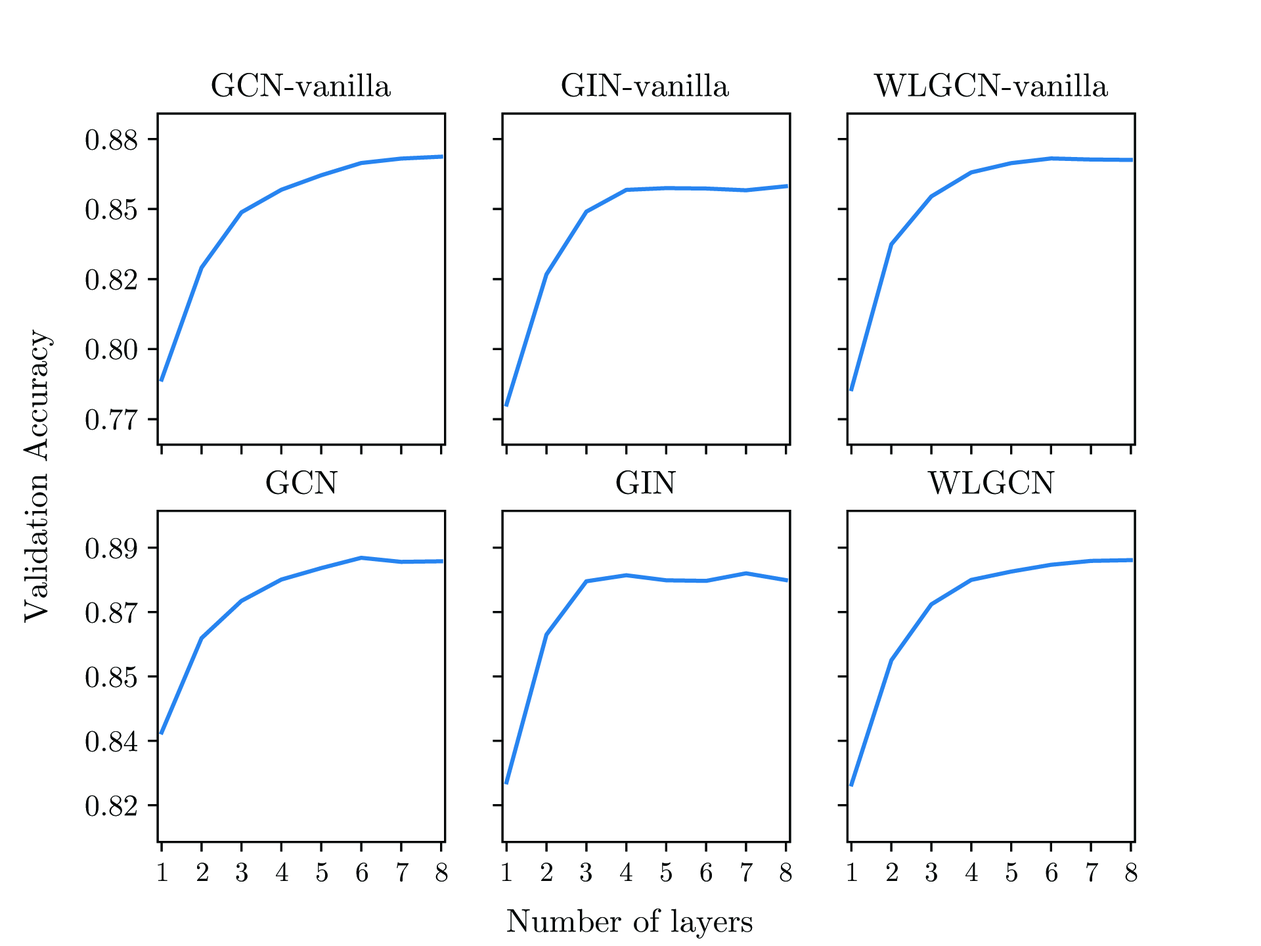
<style>
.page{position:relative;width:1261px;height:946px;background:#ffffff}
.page>*{position:absolute;margin:0}
.t1{font:32.8px "CMUSerif-Roman";color:#060808}
.t2{font:30.1px "CMUSerif-Roman";color:#060808}
.t3{font:27.4px "CMUSerif-Roman";color:#060808}
</style>
<div class="page">
<p class="t1" style="left:211px;top:73px;width:180px;height:24px">GCN-vanilla</p>
<p class="t1" style="left:562px;top:73px;width:167px;height:24px">GIN-vanilla</p>
<p class="t1" style="left:873px;top:73px;width:235px;height:24px">WLGCN-vanilla</p>
<p class="t2" style="left:85px;top:129px;width:52px;height:21px">0.88</p>
<p class="t2" style="left:85px;top:198px;width:52px;height:22px">0.85</p>
<p class="t2" style="left:85px;top:269px;width:52px;height:21px">0.82</p>
<p class="t1" style="left:23px;top:329px;width:31px;height:294px;rotate:-90deg">Validation Accuracy</p>
<p class="t2" style="left:85px;top:338px;width:52px;height:22px">0.80</p>
<p class="t2" style="left:85px;top:408px;width:53px;height:22px">0.77</p>
<p class="t1" style="left:266px;top:470px;width:72px;height:25px">GCN</p>
<p class="t1" style="left:616px;top:470px;width:60px;height:25px">GIN</p>
<p class="t1" style="left:927px;top:470px;width:128px;height:25px">WLGCN</p>
<p class="t2" style="left:85px;top:537px;width:52px;height:22px">0.89</p>
<p class="t2" style="left:85px;top:602px;width:53px;height:21px">0.87</p>
<p class="t2" style="left:85px;top:666px;width:52px;height:22px">0.85</p>
<p class="t2" style="left:85px;top:730px;width:52px;height:22px">0.84</p>
<p class="t2" style="left:85px;top:795px;width:52px;height:21px">0.82</p>
<p class="t3" style="left:158px;top:862px;width:9px;height:19px">1</p>
<p class="t3" style="left:197px;top:862px;width:11px;height:19px">2</p>
<p class="t3" style="left:236px;top:862px;width:12px;height:19px">3</p>
<p class="t3" style="left:276px;top:862px;width:12px;height:19px">4</p>
<p class="t3" style="left:317px;top:862px;width:11px;height:19px">5</p>
<p class="t3" style="left:356px;top:862px;width:12px;height:19px">6</p>
<p class="t3" style="left:397px;top:862px;width:11px;height:19px">7</p>
<p class="t3" style="left:435px;top:862px;width:13px;height:19px">8</p>
<p class="t3" style="left:502px;top:862px;width:10px;height:19px">1</p>
<p class="t3" style="left:541px;top:862px;width:11px;height:19px">2</p>
<p class="t3" style="left:580px;top:862px;width:12px;height:19px">3</p>
<p class="t3" style="left:620px;top:862px;width:12px;height:19px">4</p>
<p class="t3" style="left:661px;top:862px;width:11px;height:19px">5</p>
<p class="t3" style="left:700px;top:862px;width:12px;height:19px">6</p>
<p class="t3" style="left:741px;top:862px;width:12px;height:19px">7</p>
<p class="t3" style="left:780px;top:862px;width:12px;height:19px">8</p>
<p class="t3" style="left:847px;top:862px;width:10px;height:19px">1</p>
<p class="t3" style="left:887px;top:862px;width:11px;height:19px">2</p>
<p class="t3" style="left:925px;top:862px;width:12px;height:19px">3</p>
<p class="t3" style="left:965px;top:862px;width:13px;height:19px">4</p>
<p class="t3" style="left:1006px;top:862px;width:11px;height:19px">5</p>
<p class="t3" style="left:1046px;top:862px;width:11px;height:19px">6</p>
<p class="t3" style="left:1086px;top:862px;width:12px;height:19px">7</p>
<p class="t3" style="left:1125px;top:862px;width:12px;height:19px">8</p>
<p class="t1" style="left:507px;top:908px;width:246px;height:30px">Number of layers</p>
</div>
